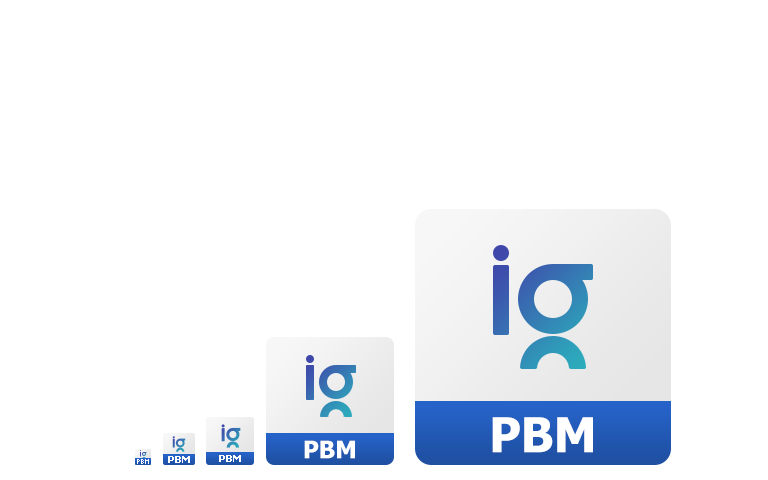
<style>
.page{position:relative;width:768px;height:480px;background:#ffffff}
.page>*{position:absolute;margin:0}
.t1{font:48px "Tahoma-Bold";color:#ffffff}
.t2{font:24px "Tahoma-Bold";color:#ffffff}
.t3{font:10px "Tahoma-Bold";color:#ffffff}
</style>
<div class="page">
<p class="t1" style="left:492px;top:417px;width:101px;height:36px">PBM</p>
<p class="t2" style="left:304px;top:440px;width:51px;height:19px">PBM</p>
<p class="t3" style="left:168px;top:456px;width:22px;height:7px">PBM</p>
<p class="t3" style="left:219px;top:455px;width:22px;height:7px">PBM</p>
</div>
